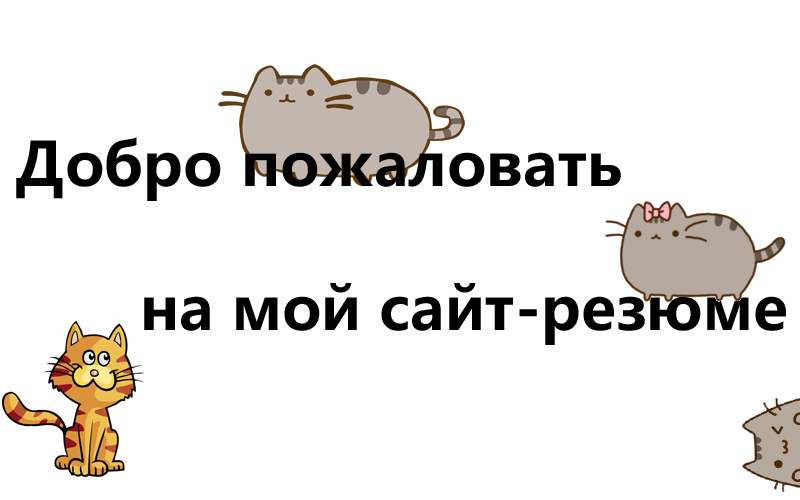
<style>
.page{position:relative;width:800px;height:500px;background:#ffffff}
.page>*{position:absolute;margin:0}
.t1{font:60px "MicrosoftYaHei-Bold";color:#000000}
</style>
<div class="page">
<p class="t1" style="left:16px;top:137px;width:605px;height:64px">Добро пожаловать</p>
<p class="t1" style="left:144px;top:283px;width:642px;height:62px">на мой сайт-резюме</p>
</div>
